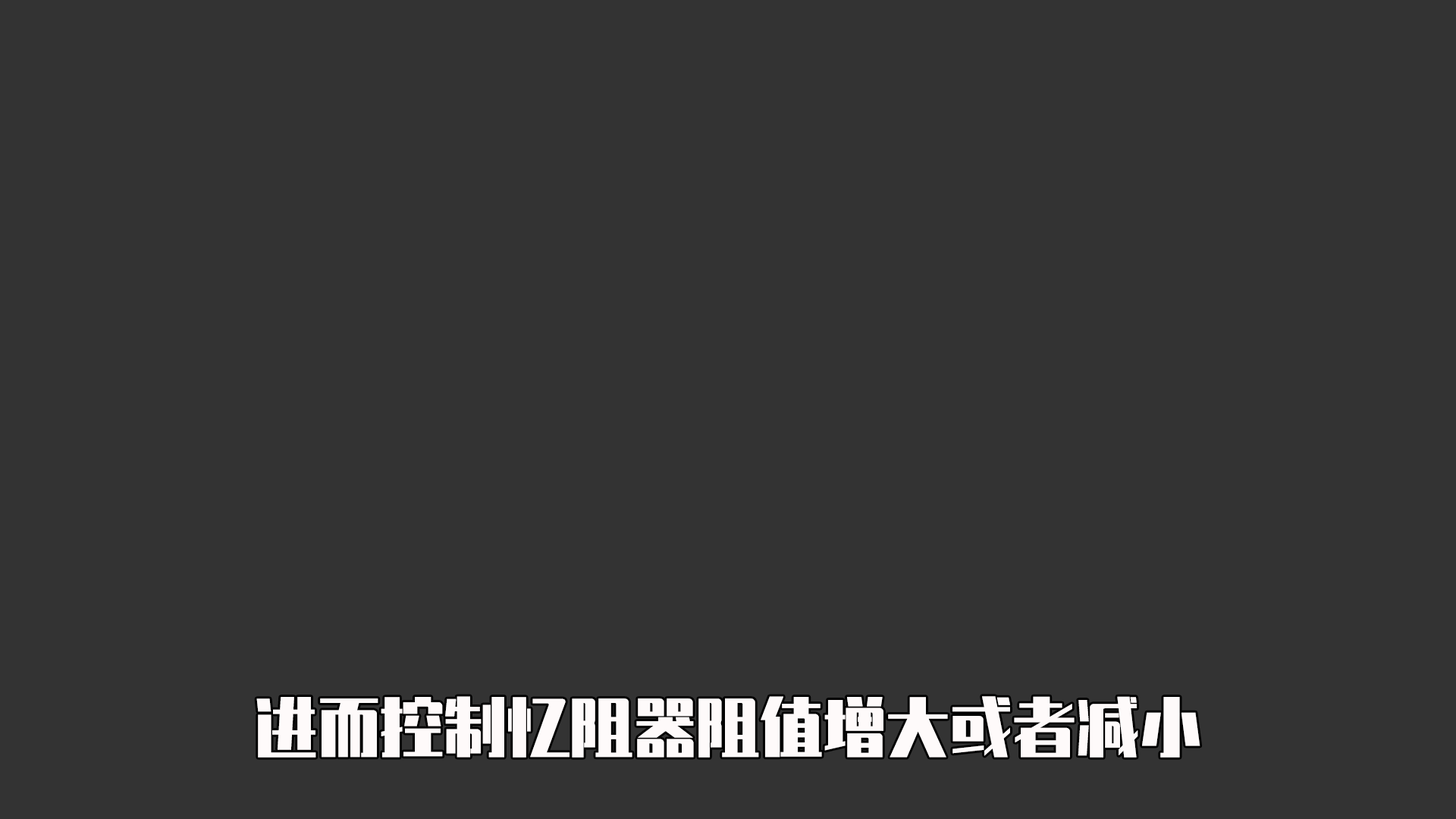
<style>
.page{position:relative;width:1456px;height:819px;background:#333333}
.page>*{position:absolute;margin:0}
.t1{font:63.2px "ZhenyanGB-Regular";color:#fefafa}
</style>
<div class="page">
<p class="t1" style="left:256px;top:696px;width:944px;height:62px">进而控制忆阻器阻值增大或者减小</p>
</div>
